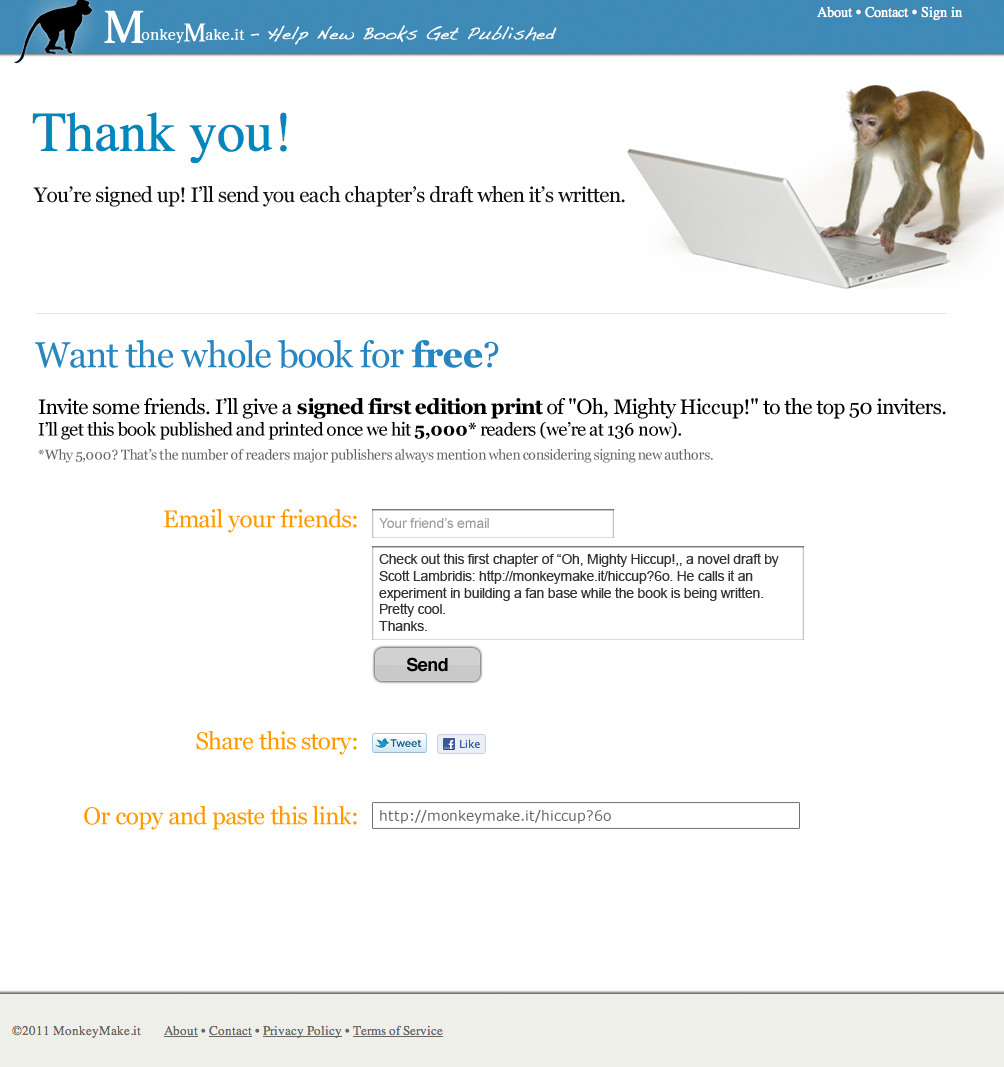
<style>
.page{position:relative;width:1004px;height:1067px;background:#ffffff}
.page>*{position:absolute;margin:0}
.t1{font:21px "Georgia";letter-spacing:-0.025em;color:#111111}
.t2{font:36px "Georgia";letter-spacing:-0.025em;color:#2886bf}
.t3{font:36px "Georgia-Bold";letter-spacing:-0.025em;color:#2886bf}
.t4{font:18px "Georgia";letter-spacing:-0.025em;color:#000000}
.t5{font:21px "Georgia";letter-spacing:-0.025em;color:#000000}
.t6{font:21px "Georgia-Bold";letter-spacing:-0.025em;color:#000000}
.t7{font:18px "Georgia-Bold";letter-spacing:-0.025em;color:#000000}
.t8{font:14px "Georgia";letter-spacing:-0.025em;color:#666666}
.t9{font:24px "Georgia";letter-spacing:-0.025em;color:#ff9a00}
.t10{font:14px "ArialMT";letter-spacing:-0.025em;color:#999999}
.t11{font:14px "ArialMT";letter-spacing:-0.025em;color:#333333}
.t12{font:18px "Helvetica-Bold";letter-spacing:-0.025em;color:#000000}
.t13{font:14px "Verdana";color:#666666}
</style>
<div class="page">
<p class="t1" style="left:33px;top:186px;width:592px;height:21px">You’re signed up! I’ll send you each chapter’s draft when it’s written.</p>
<p class="t2" style="left:35px;top:340px;width:464px;height:29px">Want the whole book for <span class="t3">free</span>?</p>
<p class="t4" style="left:38px;top:398px;width:908px;height:42px"><span class="t5">Invite some friends. I’ll give a </span><span class="t6">signed first edition print </span><span class="t5">of "Oh, Mighty Hiccup!" to the top 50 inviters. <br></span>I’ll get this book published and printed once we hit <span class="t7">5,000*</span> readers (we’re at 136 now).</p>
<p class="t8" style="left:38px;top:449px;width:675px;height:14px">*Why 5,000? That’s the number of readers major publishers always mention when considering signing new authors.</p>
<p class="t9" style="left:164px;top:509px;width:193px;height:24px">Email your friends:</p>
<p class="t10" style="left:379px;top:518px;width:110px;height:10px">Your friend’s email</p>
<p class="t11" style="left:379px;top:553px;width:400px;height:78px">Check out this first chapter of “Oh, Mighty Hiccup!,, a novel draft by Scott Lambridis: http://monkeymake.it/hiccup?6o. He calls it an experiment in building a fan base while the book is being written. Pretty cool. <br>Thanks.</p>
<p class="t12" style="left:407px;top:657px;width:41px;height:15px">Send</p>
<p class="t9" style="left:196px;top:731px;width:161px;height:24px">Share this story:</p>
<p class="t9" style="left:84px;top:806px;width:273px;height:24px">Or copy and paste this link:</p>
<p class="t13" style="left:380px;top:810px;width:231px;height:14px">http://monkeymake.it/hiccup?6o</p>
</div>
